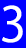
<style>
.page{position:relative;width:26px;height:48px;background:#0000ff}
.page>*{position:absolute;margin:0}
.t1{font:47.6px "KozGoPr6N-Regular";color:#ffffff}
</style>
<div class="page">
<p class="t1" style="left:2px;top:5px;width:21px;height:38px">3</p>
</div>
